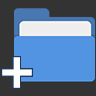
<style>
.page{position:relative;width:96px;height:96px;background:#333333}
.page>*{position:absolute;margin:0}
.t1{font:57.6px "TaipeiSansTCBeta-Bold";color:#ffffff}
</style>
<div class="page">
<p class="t1" style="left:2px;top:57px;width:30px;height:31px">+</p>
</div>
